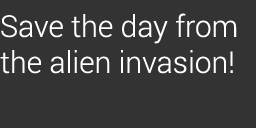
<style>
.page{position:relative;width:256px;height:128px;background:#333333}
.page>*{position:absolute;margin:0}
.t1{font:30px "Roboto-Light";color:#ffffff}
</style>
<div class="page">
<p class="t1" style="left:0px;top:13px;width:237px;height:61px">Save the day from the alien invasion!</p>
</div>
